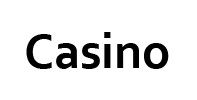
<style>
.page{position:relative;width:197px;height:100px;background:#ffffff}
.page>*{position:absolute;margin:0}
.t1{font:50.8px "Corbel-Bold";color:#000000}
</style>
<div class="page">
<p class="t1" style="left:26px;top:32px;width:143px;height:37px">Casino</p>
</div>
